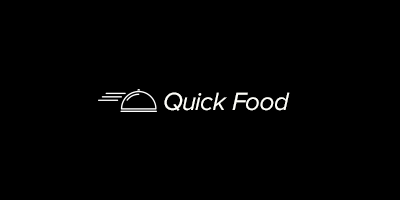
<style>
.page{position:relative;width:400px;height:200px;background:#000000}
.page>*{position:absolute;margin:0}
.t1{font:26px "ProximaNova-RegularIt";letter-spacing:-0.025em;color:#fefef9}
</style>
<div class="page">
<p class="t1" style="left:164px;top:92px;width:126px;height:19px">Quick Food</p>
</div>
